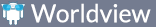
<style>
.page{position:relative;width:156px;height:27px;background:#747c90}
.page>*{position:absolute;margin:0}
.t1{font:24.9px "Lato-Regular";color:#ffffff}
</style>
<div class="page">
<p class="t1" style="left:31px;top:3px;width:120px;height:20px">Worldview</p>
</div>
